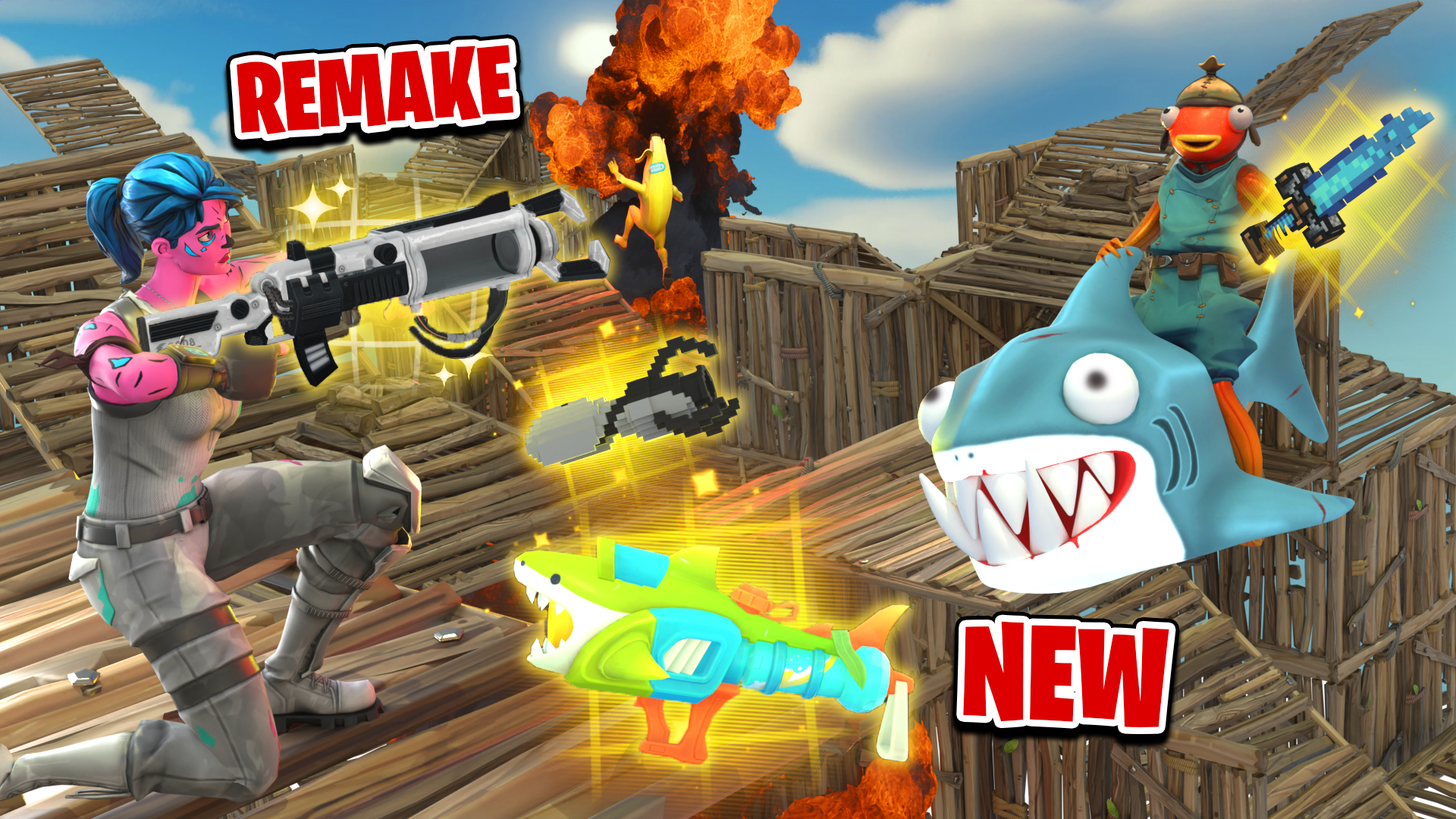
<style>
.page{position:relative;width:1456px;height:819px}
.page>*{position:absolute;margin:0}
.t1{font:99.3px "BurbankBigCondensed-Black";color:#dd0000}
.t2{font:136px "BurbankBigCondensed-Black";color:#dd0000}
</style>
<div class="page">
<p class="t1" style="left:237px;top:45px;width:277px;height:90px;rotate:-4deg">REMAKE</p>
<p class="t2" style="left:963px;top:621px;width:206px;height:106px;rotate:2deg">NEW</p>
</div>
